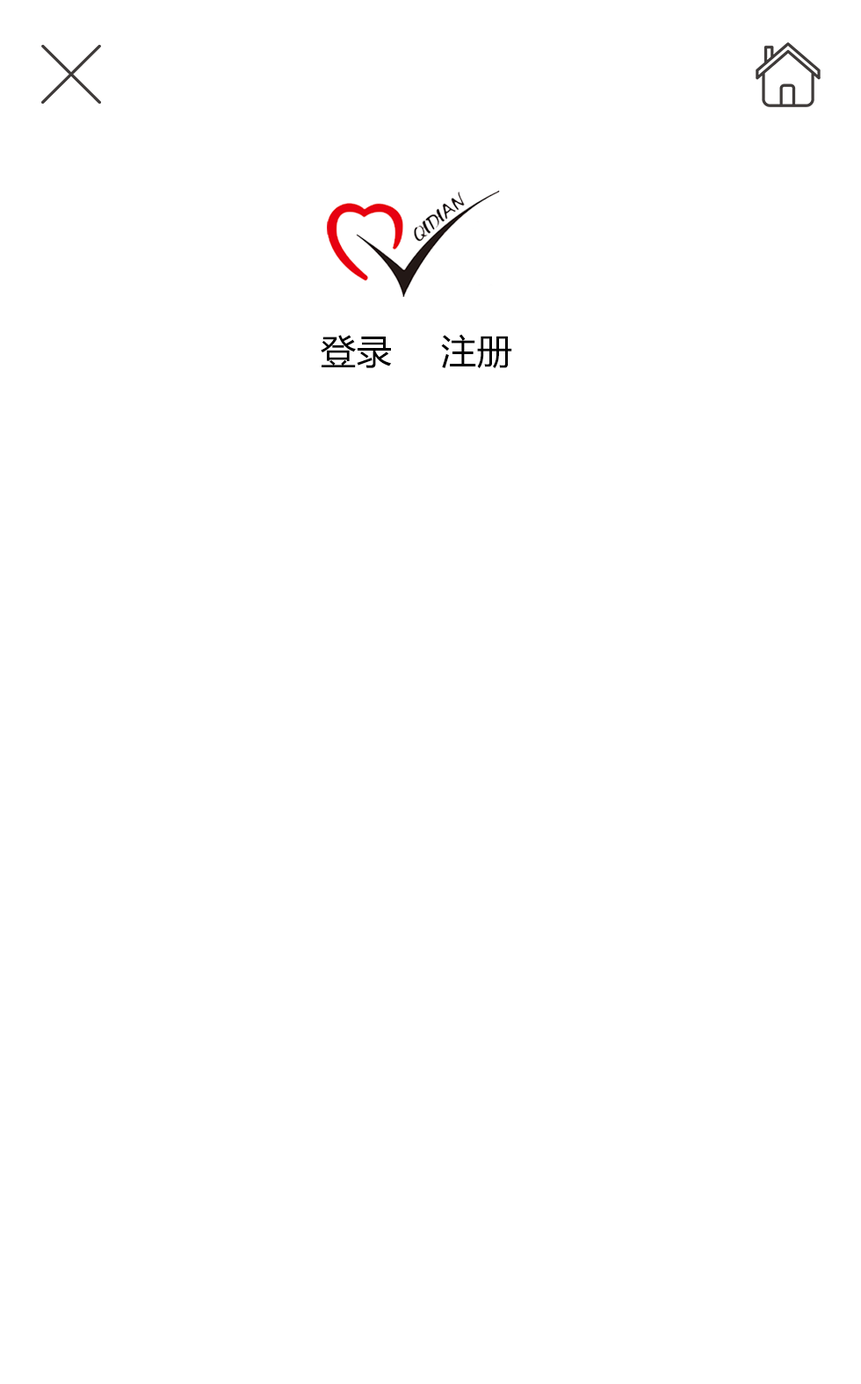
<style>
.page{position:relative;width:861px;height:1384px;background:#ffffff}
.page>*{position:absolute;margin:0}
.t1{font:35.2px "MicrosoftYaHei";letter-spacing:0.02em;color:#000000}
</style>
<div class="page">
<p class="t1" style="left:321px;top:335px;width:71px;height:33px">登录</p>
<p class="t1" style="left:441px;top:334px;width:71px;height:35px">注册</p>
</div>
